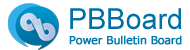
<style>
.page{position:relative;width:190px;height:50px;background:#ffffff}
.page>*{position:absolute;margin:0}
.t1{font:29px "ArialMT";color:#0071a4}
.t2{font:11px "Tahoma";letter-spacing:0.01em;color:#0079ac;font-weight:bold;scale:1.04 1}
</style>
<div class="page">
<p class="t1" style="left:70px;top:8px;width:111px;height:22px">PBBoard</p>
<p class="t2" style="left:69px;top:35px;width:113px;height:10px">Power Bulletin Board</p>
</div>
